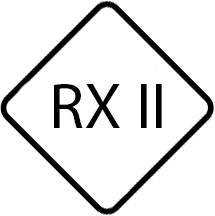
<style>
.page{position:relative;width:215px;height:216px;background:#ffffff}
.page>*{position:absolute;margin:0}
.t1{font:65.6px "MyriadPro-Regular";color:#000000}
</style>
<div class="page">
<p class="t1" style="left:54px;top:84px;width:108px;height:44px">RX II</p>
</div>
